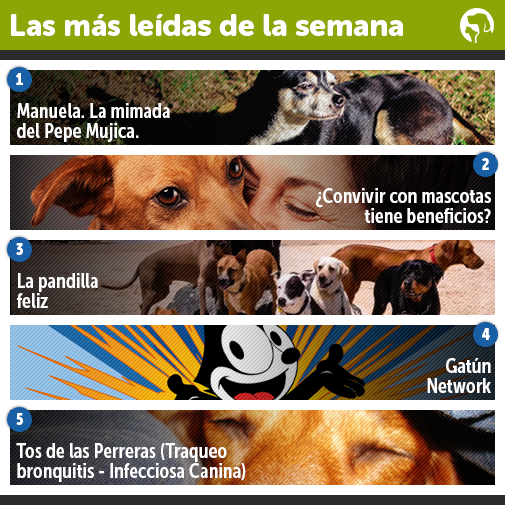
<style>
.page{position:relative;width:505px;height:505px}
.page>*{position:absolute;margin:0}
.t1{font:30.4px "MuseoSansRounded-900";color:#ffffff}
.t2{font:16.7px "MuseoSansCond-900";letter-spacing:-0.05em;color:#ffffff}
.t3{font:20px/20px "MuseoSansCond-700";color:#ffffff}
</style>
<div class="page">
<p class="t1" style="left:11px;top:14px;width:392px;height:22px">Las más leídas de la semana</p>
<p class="t2" style="left:16px;top:73px;width:7px;height:12px">1</p>
<p class="t3" style="left:17px;top:103px;width:153px;height:39px">Manuela. La mimada<br>del Pepe Mujica.</p>
<p class="t2" style="left:482px;top:158px;width:7px;height:12px">2</p>
<p class="t3" style="left:316px;top:188px;width:175px;height:35px;text-align:right">¿Convivir con mascotas<br>tiene beneficios?</p>
<p class="t2" style="left:16px;top:243px;width:7px;height:12px">3</p>
<p class="t3" style="left:17px;top:273px;width:81px;height:35px">La pandilla<br>feliz</p>
<p class="t2" style="left:482px;top:328px;width:8px;height:12px">4</p>
<p class="t3" style="left:427px;top:358px;width:64px;height:35px;text-align:right">Gatún<br>Network</p>
<p class="t2" style="left:16px;top:413px;width:7px;height:12px">5</p>
<p class="t3" style="left:16px;top:443px;width:230px;height:39px">Tos de las Perreras (Traqueo<br>bronquitis - Infecciosa Canina)</p>
</div>
